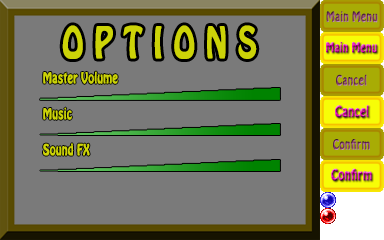
<style>
.page{position:relative;width:384px;height:240px;background:#7a7a7a}
.page>*{position:absolute;margin:0}
.t1{font:12.5px "HoboStd";letter-spacing:0.02em;scale:0.8 1}
.t2{font:38.7px "HoboStd";letter-spacing:0.36em;color:#ccd308;scale:0.77 1}
.t3{font:13.6px "HoboStd";letter-spacing:0.02em;color:#ccd308;scale:0.77 1}
.t4{font:13.8px "HoboStd";letter-spacing:0.02em;scale:0.8 1}
</style>
<div class="page">
<p class="t1" style="left:326px;top:11px;width:52px;height:12px">Main Menu</p>
<p class="t2" style="left:62px;top:25px;width:195px;height:34px">OPTIONS</p>
<p class="t1" style="left:326px;top:41px;width:51px;height:12px">Main Menu</p>
<p class="t3" style="left:43px;top:71px;width:75px;height:13px">Master Volume</p>
<p class="t1" style="left:336px;top:74px;width:31px;height:12px">Cancel</p>
<p class="t3" style="left:43px;top:107px;width:29px;height:13px">Music</p>
<p class="t4" style="left:335px;top:105px;width:34px;height:13px">Cancel</p>
<p class="t3" style="left:43px;top:143px;width:47px;height:13px">Sound FX</p>
<p class="t1" style="left:333px;top:139px;width:37px;height:11px">Confirm</p>
<p class="t4" style="left:331px;top:168px;width:41px;height:13px">Confirm</p>
</div>
